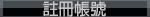
<style>
.page{position:relative;width:150px;height:17px;background:#474b4f}
.page>*{position:absolute;margin:0}
.t1{font:16px "AdobeFanHeitiStd-Bold";color:#c5c5c5}
</style>
<div class="page">
<p class="t1" style="left:43px;top:1px;width:63px;height:16px">註冊帳號</p>
</div>
